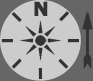
<style>
.page{position:relative;width:93px;height:81px;background:#cccccc}
.page>*{position:absolute;margin:0}
.t1{font:24px "BlueHighwayBold";color:#333333;font-weight:bold}
</style>
<div class="page">
<p class="t1" style="left:34px;top:1px;width:14px;height:15px">N</p>
</div>
